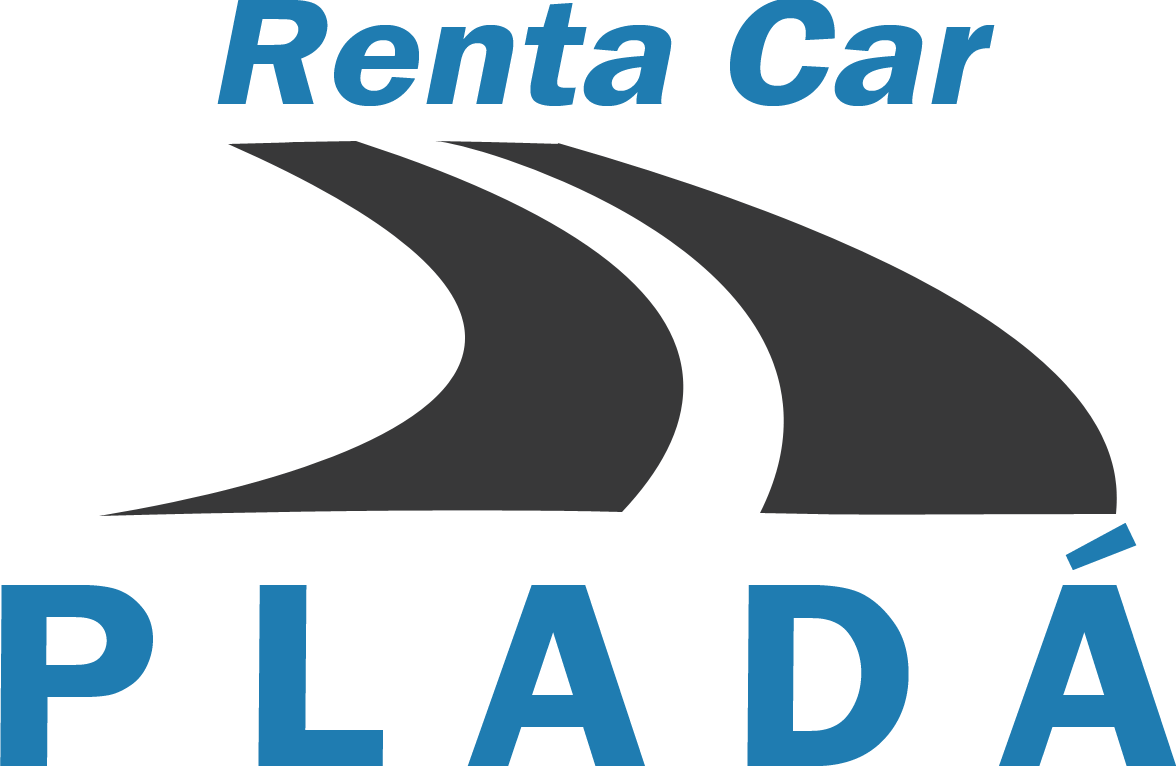
<style>
.page{position:relative;width:1176px;height:766px;background:#ffffff}
.page>*{position:absolute;margin:0}
.t1{font:156.1px "FranklinGothic-Demi";color:#1f7cb1;font-style:italic;scale:1.13 1}
.t2{font:275.2px "FranklinGothic-Demi";letter-spacing:0.28em;color:#1f7cb1;font-style:italic;scale:1.06 1}
</style>
<div class="page">
<p class="t1" style="left:217px;top:0px;width:778px;height:106px">Renta Car</p>
<p class="t2" style="left:0px;top:523px;width:1177px;height:243px">PLADÁ</p>
</div>
